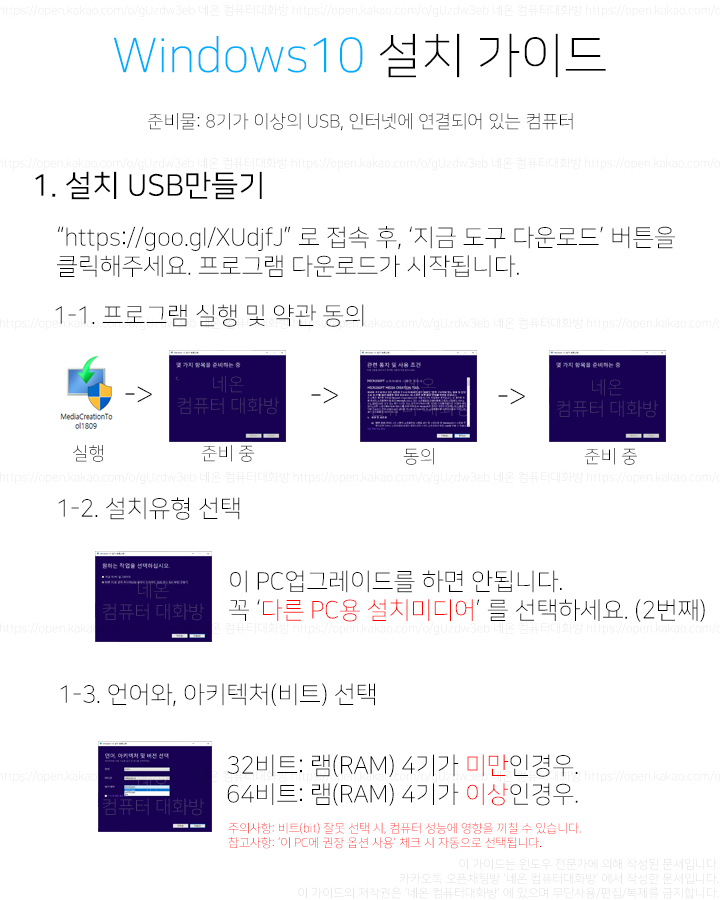
<style>
.page{position:relative;width:720px;height:900px;background:#ffffff}
.page>*{position:absolute;margin:0}
.t1{font:48px "NanumSquareL";color:#00aeff}
.t2{font:48px "NanumSquareL";color:#000000}
.t3{font:18px "NanumSquareL";color:#000000}
.t4{font:30px "NanumSquareR";color:#000000}
.t5{font:24px "NanumSquareL";color:#000000}
.t6{font:18px "NanumSquareL";color:#43366b}
.t7{font:30px "NanumSquareL";color:#000000}
.t8{font:18px "NanumSquareL"}
.t9{font:24px "NanumSquareL";color:#ff0000}
.t10{font:12px "NanumSquareL";color:#ff0000}
.t11{font:12px "NanumSquareL"}
</style>
<div class="page">
<p class="t1" style="left:113px;top:33px;width:493px;height:45px">Windows10<span class="t2"> 설치 가이드</span></p>
<p class="t3" style="left:147px;top:113px;width:426px;height:18px">준비물: 8기가 이상의 USB, 인터넷에 연결되어 있는 컴퓨터</p>
<p class="t4" style="left:35px;top:171px;width:227px;height:29px">1. 설치 USB만들기</p>
<p class="t5" style="left:57px;top:226px;width:618px;height:51px">“https://goo.gl/XUdjfJ” 로 접속 후, ‘지금 도구 다운로드’ 버튼을<br>클릭해주세요. 프로그램 다운로드가 시작됩니다.</p>
<p class="t5" style="left:55px;top:304px;width:309px;height:23px">1-1. 프로그램 실행 및 약관 동의</p>
<p class="t6" style="left:178px;top:376px;width:101px;height:39px;text-align:center">네온<br>컴퓨터 대화방</p>
<p class="t7" style="left:125px;top:386px;width:27px;height:17px">-&gt;</p>
<p class="t7" style="left:311px;top:387px;width:27px;height:17px">-&gt;</p>
<p class="t7" style="left:498px;top:388px;width:27px;height:17px">-&gt;</p>
<p class="t6" style="left:557px;top:379px;width:101px;height:39px;text-align:center">네온<br>컴퓨터 대화방</p>
<p class="t8" style="left:73px;top:445px;width:30px;height:17px">실행</p>
<p class="t3" style="left:201px;top:445px;width:53px;height:17px">준비 중</p>
<p class="t8" style="left:403px;top:448px;width:31px;height:17px">동의</p>
<p class="t3" style="left:584px;top:448px;width:53px;height:17px">준비 중</p>
<p class="t5" style="left:58px;top:497px;width:182px;height:23px">1-2. 설치유형 선택</p>
<p class="t6" style="left:103px;top:582px;width:101px;height:39px;text-align:center">네온<br>컴퓨터 대화방</p>
<p class="t5" style="left:229px;top:570px;width:476px;height:52px">이 PC업그레이드를 하면 안됩니다.<br>꼭 ‘<span class="t9">다른 PC용 설치미디어</span>’ 를 선택하세요. (2번째)</p>
<p class="t5" style="left:60px;top:683px;width:315px;height:24px">1-3. 언어와, 아키텍처(비트) 선택</p>
<p class="t5" style="left:227px;top:754px;width:351px;height:52px">32비트: 램(RAM) 4기가 <span class="t9">미만</span>인경우.<br>64비트: 램(RAM) 4기가 <span class="t9">이상</span>인경우.</p>
<p class="t10" style="left:228px;top:822px;width:353px;height:27px">주의사항: 비트(bit) 잘못 선택 시, 컴퓨터 성능에 영향을 끼칠 수 있습니다.<br>참고사항: ‘이 PC에 권장 옵션 사용’ 체크 시 자동으로 선택됩니다.</p>
<p class="t11" style="left:298px;top:858px;width:421px;height:41px;text-align:right">이 가이드는 윈도우 전문가에 의해 작성된 문서입니다.<br>카카오톡 오픈채팅방 ‘네온 컴퓨터대화방’ 에서 작성한 문서입니다.<br>이 가이드의 저작권은 ‘네온 컴퓨터대화방’ 에 있으며 무단사용/편집/복제를 금지합니다.</p>
</div>
